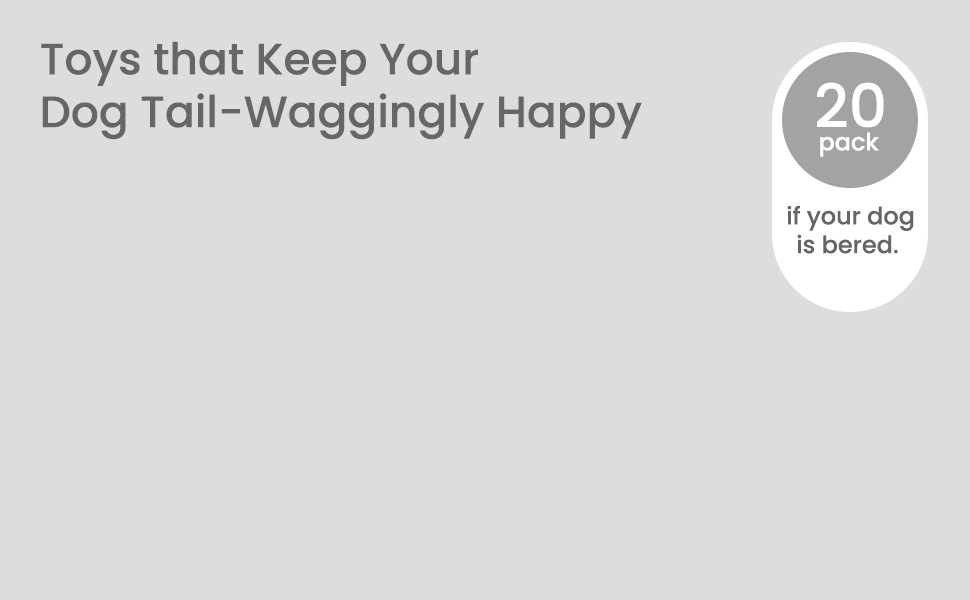
<style>
.page{position:relative;width:970px;height:600px;background:#dcdddf}
.page>*{position:absolute;margin:0}
.t1{font:44px "Poppins-Medium";color:#666666}
.t2{font:60px "Poppins-Medium";color:#ffffff}
.t3{font:24px "Poppins-Medium";color:#ffffff}
.t4{font:24px "Poppins-Medium";color:#666666}
</style>
<div class="page">
<p class="t1" style="left:41px;top:41px;width:601px;height:99px">Toys that Keep Your<br>Dog Tail-Waggingly Happy</p>
<p class="t2" style="left:817px;top:82px;width:67px;height:46px">20</p>
<p class="t3" style="left:820px;top:132px;width:59px;height:25px">pack</p>
<p class="t4" style="left:787px;top:205px;width:127px;height:49px;text-align:center">if your dog<br>is bered.</p>
</div>
